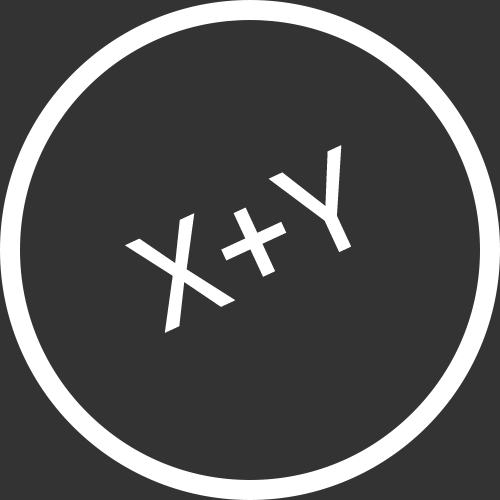
<style>
.page{position:relative;width:500px;height:500px;background:#333333}
.page>*{position:absolute;margin:0}
.t1{font:135px "Roboto-Regular";color:#ffffff}
</style>
<div class="page">
<p class="t1" style="left:125px;top:145px;width:226px;height:188px;rotate:-25deg">X+Y</p>
</div>
